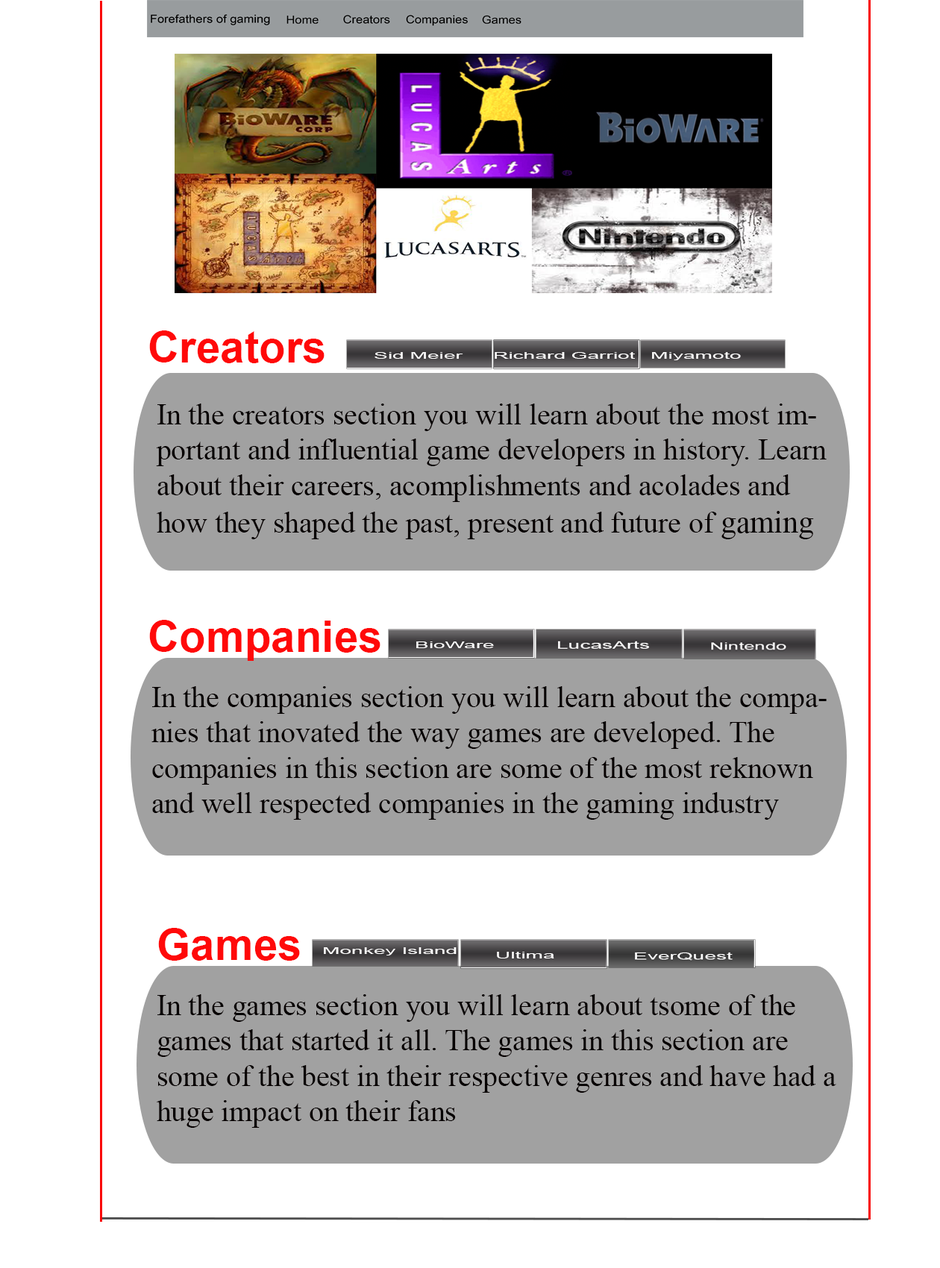
<style>
.page{position:relative;width:940px;height:1268px;background:#ffffff}
.page>*{position:absolute;margin:0}
.t1{font:43.5px "Arial-BoldMT";color:#ff0909}
.t2{font:29.5px "TimesNewRomanPSMT";color:#060000}
.t3{font:31.1px "TimesNewRomanPSMT";color:#060000}
</style>
<div class="page">
<p class="t1" style="left:149px;top:331px;width:176px;height:32px">Creators</p>
<p class="t2" style="left:156px;top:404px;width:671px;height:135px">In the creators section you will learn about the most important and influential game developers in history. Learn about their careers, acomplishments and acolades and how they shaped the past, present and future of <span class="t3">gaming</span></p>
<p class="t1" style="left:149px;top:620px;width:232px;height:41px">Companies</p>
<p class="t2" style="left:151px;top:686px;width:676px;height:134px">In the companies section you will learn about the companies that inovated the way games are developed. The companies in this section are some of the most reknown and well respected companies in the gaming industry</p>
<p class="t1" style="left:158px;top:928px;width:142px;height:33px">Games</p>
<p class="t2" style="left:157px;top:995px;width:679px;height:133px">In the games section you will learn about tsome of the games that started it all. The games in this section are some of the best in their respective genres and have had a huge impact on their fans</p>
</div>
